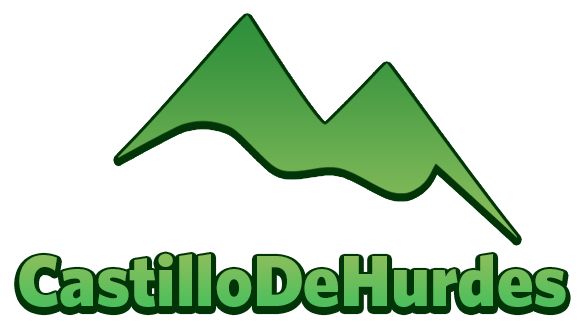
<style>
.page{position:relative;width:588px;height:335px;background:#ffffff}
.page>*{position:absolute;margin:0}
.t1{font:72px "WhitneyHTF-Black";color:#65bf5c}
</style>
<div class="page">
<p class="t1" style="left:19px;top:253px;width:547px;height:54px">CastilloDeHurdes</p>
</div>
